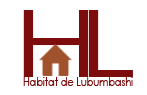
<style>
.page{position:relative;width:147px;height:95px;background:#ffffff}
.page>*{position:absolute;margin:0}
.t1{font:93.2px "CenturyGothic";color:#7d0d0d;scale:1.35 1}
.t2{font:12px "CenturyGothic";color:#7d0d0d;scale:0.81 1}
</style>
<div class="page">
<p class="t1" style="left:23px;top:10px;width:66px;height:67px">H</p>
<p class="t1" style="left:89px;top:10px;width:44px;height:67px">L</p>
<p class="t2" style="left:23px;top:77px;width:110px;height:9px">Habitat de Lubumbashi</p>
</div>
